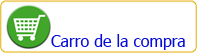
<style>
.page{position:relative;width:198px;height:53px;background:#ffffff}
.page>*{position:absolute;margin:0}
.t1{font:16px "Tahoma";color:#070cd8}
</style>
<div class="page">
<p class="t1" style="left:51px;top:34px;width:134px;height:16px">Carro de la compra</p>
</div>
